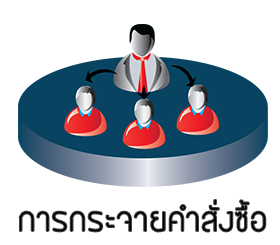
<style>
.page{position:relative;width:280px;height:245px;background:#ffffff}
.page>*{position:absolute;margin:0}
.t1{font:30px "BangnaNew";color:#020200}
</style>
<div class="page">
<p class="t1" style="left:19px;top:200px;width:247px;height:32px">การกระจายคำสั่งซื้อ</p>
</div>
